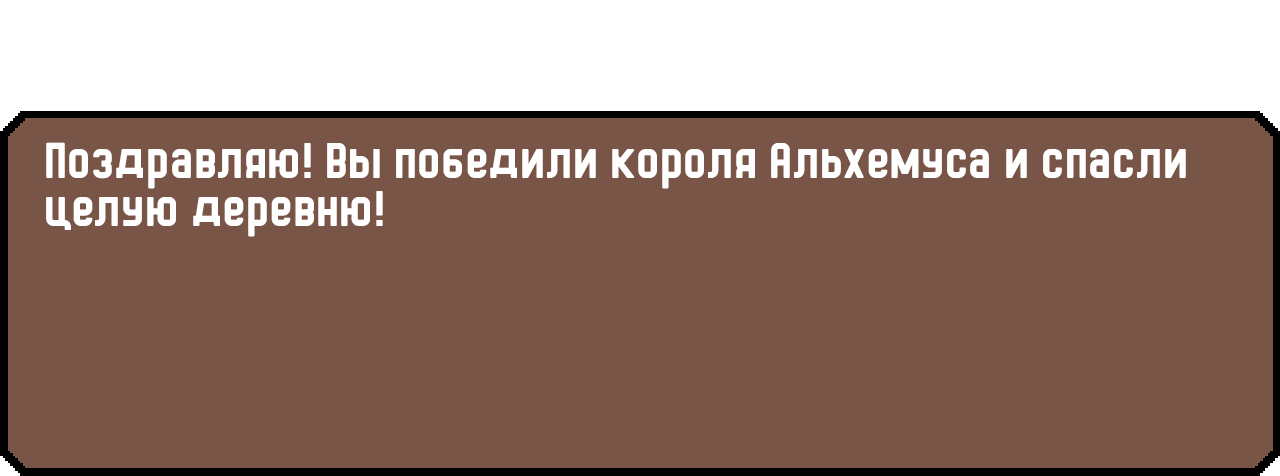
<style>
.page{position:relative;width:1280px;height:476px;background:#795548}
.page>*{position:absolute;margin:0}
.t1{font:48px/48px "HermanoMayor";color:#ffffff}
</style>
<div class="page">
<p class="t1" style="left:46px;top:142px;width:1140px;height:95px">Поздравляю! Вы победили короля Альхемуса и спасли целую деревню!</p>
</div>
